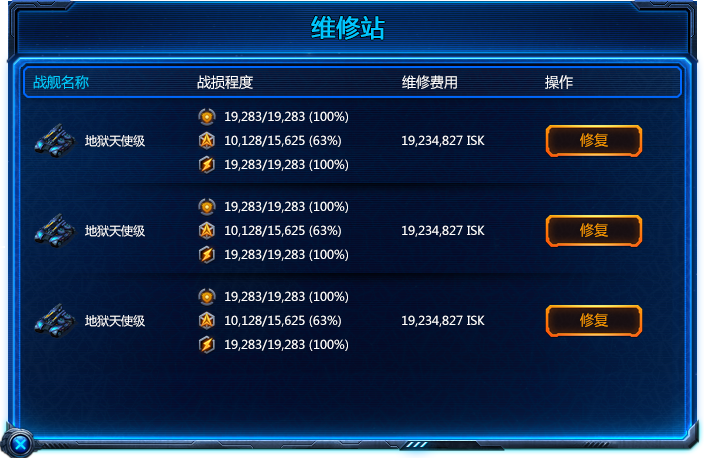
<style>
.page{position:relative;width:704px;height:458px}
.page>*{position:absolute;margin:0}
.t1{font:24px "MicrosoftYaHei";color:#00c6ff;font-weight:bold}
.t2{font:14px "MicrosoftYaHei";color:#00ccff}
.t3{font:14px "MicrosoftYaHei";color:#ffffff}
.t4{font:12px "MicrosoftYaHei";color:#ffffff}
.t5{font:14px "MicrosoftYaHei";color:#ff9c00}
</style>
<div class="page">
<p class="t1" style="left:311px;top:16px;width:74px;height:24px">维修站</p>
<p class="t2" style="left:33px;top:75px;width:56px;height:14px">战舰名称</p>
<p class="t3" style="left:197px;top:75px;width:56px;height:14px">战损程度</p>
<p class="t3" style="left:402px;top:75px;width:55px;height:14px">维修费用</p>
<p class="t3" style="left:545px;top:75px;width:28px;height:14px">操作</p>
<p class="t4" style="left:225px;top:111px;width:123px;height:12px">19,283/19,283 (100%)</p>
<p class="t4" style="left:85px;top:135px;width:60px;height:12px">地狱天使级</p>
<p class="t4" style="left:225px;top:135px;width:116px;height:12px">10,128/15,625 (63%)</p>
<p class="t4" style="left:402px;top:135px;width:83px;height:12px">19,234,827 ISK</p>
<p class="t5" style="left:580px;top:133px;width:28px;height:14px">修复</p>
<p class="t4" style="left:225px;top:159px;width:123px;height:12px">19,283/19,283 (100%)</p>
<p class="t4" style="left:225px;top:201px;width:123px;height:12px">19,283/19,283 (100%)</p>
<p class="t4" style="left:85px;top:225px;width:60px;height:12px">地狱天使级</p>
<p class="t4" style="left:225px;top:225px;width:116px;height:12px">10,128/15,625 (63%)</p>
<p class="t4" style="left:402px;top:225px;width:83px;height:12px">19,234,827 ISK</p>
<p class="t5" style="left:580px;top:223px;width:28px;height:14px">修复</p>
<p class="t4" style="left:225px;top:249px;width:123px;height:12px">19,283/19,283 (100%)</p>
<p class="t4" style="left:225px;top:291px;width:123px;height:12px">19,283/19,283 (100%)</p>
<p class="t4" style="left:85px;top:315px;width:60px;height:12px">地狱天使级</p>
<p class="t4" style="left:225px;top:315px;width:116px;height:12px">10,128/15,625 (63%)</p>
<p class="t4" style="left:402px;top:315px;width:83px;height:12px">19,234,827 ISK</p>
<p class="t5" style="left:580px;top:313px;width:28px;height:14px">修复</p>
<p class="t4" style="left:225px;top:339px;width:123px;height:12px">19,283/19,283 (100%)</p>
</div>
